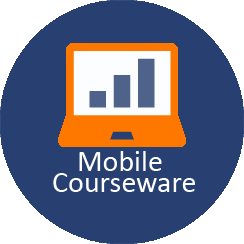
<style>
.page{position:relative;width:244px;height:244px;background:#274071}
.page>*{position:absolute;margin:0}
.t1{font:30px "Calibri";color:#ffffff}
</style>
<div class="page">
<p class="t1" style="left:79px;top:151px;width:83px;height:20px">Mobile</p>
<p class="t1" style="left:53px;top:173px;width:142px;height:19px">Courseware</p>
</div>
